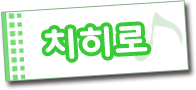
<style>
.page{position:relative;width:196px;height:90px;background:#ffffff}
.page>*{position:absolute;margin:0}
.t1{font:40px "DXMgoRB-KSCpc-EUC-H";color:#ffffff;font-weight:bold}
</style>
<div class="page">
<p class="t1" style="left:45px;top:25px;width:103px;height:34px;rotate:-3deg">치히로</p>
</div>
